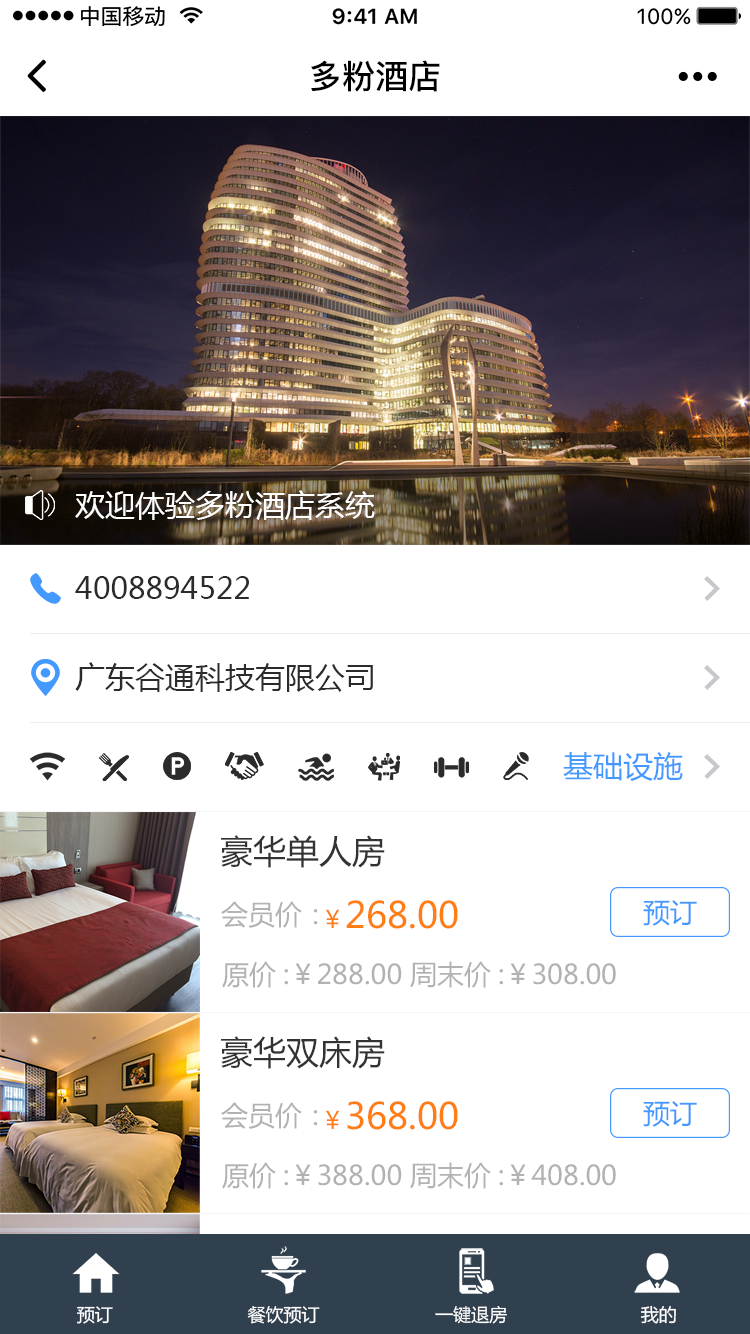
<style>
.page{position:relative;width:750px;height:1334px;background:#ffffff}
.page>*{position:absolute;margin:0}
.t1{font:33.2px "PingFang-SC-Bold";color:#000000}
.t2{font:30px "MicrosoftYaHei";color:#ffffff}
.t3{font:30px "MicrosoftYaHei";color:#2b2b2b}
.t4{font:30px "MicrosoftYaHei";color:#4499ff}
.t5{font:33px "MicrosoftYaHei";color:#333333}
.t6{font:27px "MicrosoftYaHei";color:#b2b2b2}
.t7{font:36px "MicrosoftYaHei";color:#ff7d13}
.t8{font:24px "MicrosoftYaHei";color:#ff7d13}
.t9{font:27px "MicrosoftYaHei";color:#4499ff}
.t10{font:18px "MicrosoftYaHei";color:#ffffff}
</style>
<div class="page">
<p class="t1" style="left:311px;top:60px;width:129px;height:32px">多粉酒店</p>
<p class="t2" style="left:75px;top:490px;width:300px;height:30px">欢迎体验多粉酒店系统</p>
<p class="t3" style="left:75px;top:576px;width:174px;height:23px">4008894522</p>
<p class="t3" style="left:75px;top:662px;width:298px;height:30px">广东谷通科技有限公司</p>
<p class="t4" style="left:563px;top:752px;width:120px;height:29px">基础设施</p>
<p class="t5" style="left:221px;top:835px;width:164px;height:33px">豪华单人房</p>
<p class="t6" style="left:221px;top:901px;width:97px;height:27px">会员价：</p>
<p class="t7" style="left:326px;top:900px;width:132px;height:29px"><span class="t8">￥</span>268.00</p>
<p class="t9" style="left:643px;top:900px;width:54px;height:26px">预订</p>
<p class="t6" style="left:222px;top:961px;width:394px;height:27px">原价:￥288.00 周末价:￥308.00</p>
<p class="t5" style="left:221px;top:1036px;width:164px;height:33px">豪华双床房</p>
<p class="t6" style="left:221px;top:1102px;width:97px;height:27px">会员价：</p>
<p class="t7" style="left:326px;top:1101px;width:132px;height:29px"><span class="t8">￥</span>368.00</p>
<p class="t9" style="left:643px;top:1101px;width:54px;height:26px">预订</p>
<p class="t6" style="left:222px;top:1162px;width:394px;height:27px">原价:￥388.00 周末价:￥408.00</p>
<p class="t10" style="left:77px;top:1306px;width:36px;height:18px">预订</p>
<p class="t10" style="left:247px;top:1306px;width:73px;height:18px">餐饮预订</p>
<p class="t10" style="left:435px;top:1306px;width:72px;height:18px">一键退房</p>
<p class="t10" style="left:641px;top:1305px;width:35px;height:19px">我的</p>
</div>
